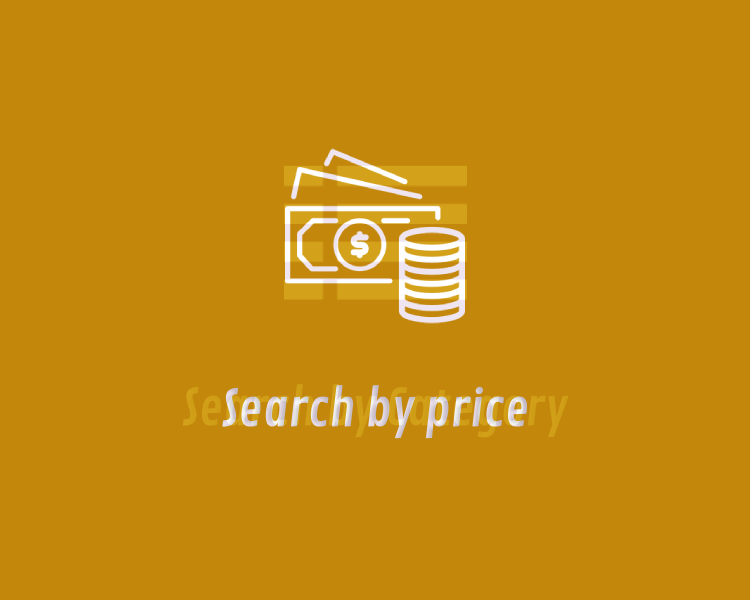
<style>
.page{position:relative;width:750px;height:600px;background:#c3870b}
.page>*{position:absolute;margin:0}
.t1{font:50px "ContrailOne-Regular"}
.t2{font:50px "ContrailOne-Regular";color:#dbd5dc}
</style>
<div class="page">
<p class="t1" style="left:182px;top:383px;width:387px;height:55px">Search by Category</p>
<p class="t2" style="left:222px;top:384px;width:306px;height:55px">Search by price</p>
</div>
